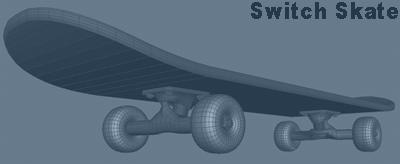
<style>
.page{position:relative;width:400px;height:164px;background:#667a8c}
.page>*{position:absolute;margin:0}
.t1{font:23.3px "Arial-Black";letter-spacing:0.05em;color:#233849;scale:0.83 1}
</style>
<div class="page">
<p class="t1" style="left:251px;top:2px;width:147px;height:17px">Switch Skate</p>
</div>
